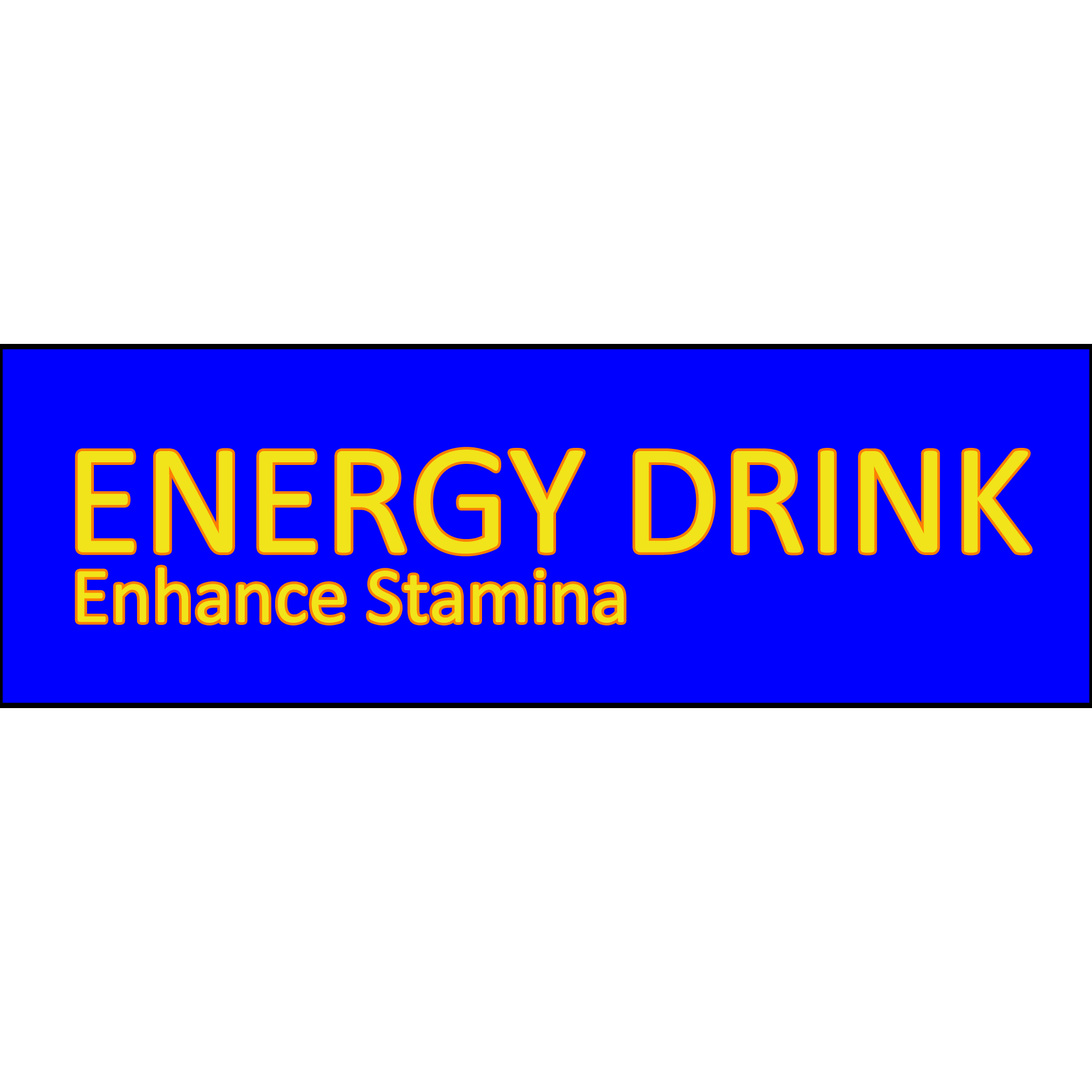
<style>
.page{position:relative;width:1092px;height:1092px;background:#ffffff}
.page>*{position:absolute;margin:0}
.t1{font:160px "Calibri";color:#f1e41a}
.t2{font:80px "Calibri";color:#f1e41a}
</style>
<div class="page">
<p class="t1" style="left:77px;top:449px;width:953px;height:105px">ENERGY DRINK</p>
<p class="t2" style="left:77px;top:567px;width:547px;height:56px">Enhance Stamina</p>
</div>
